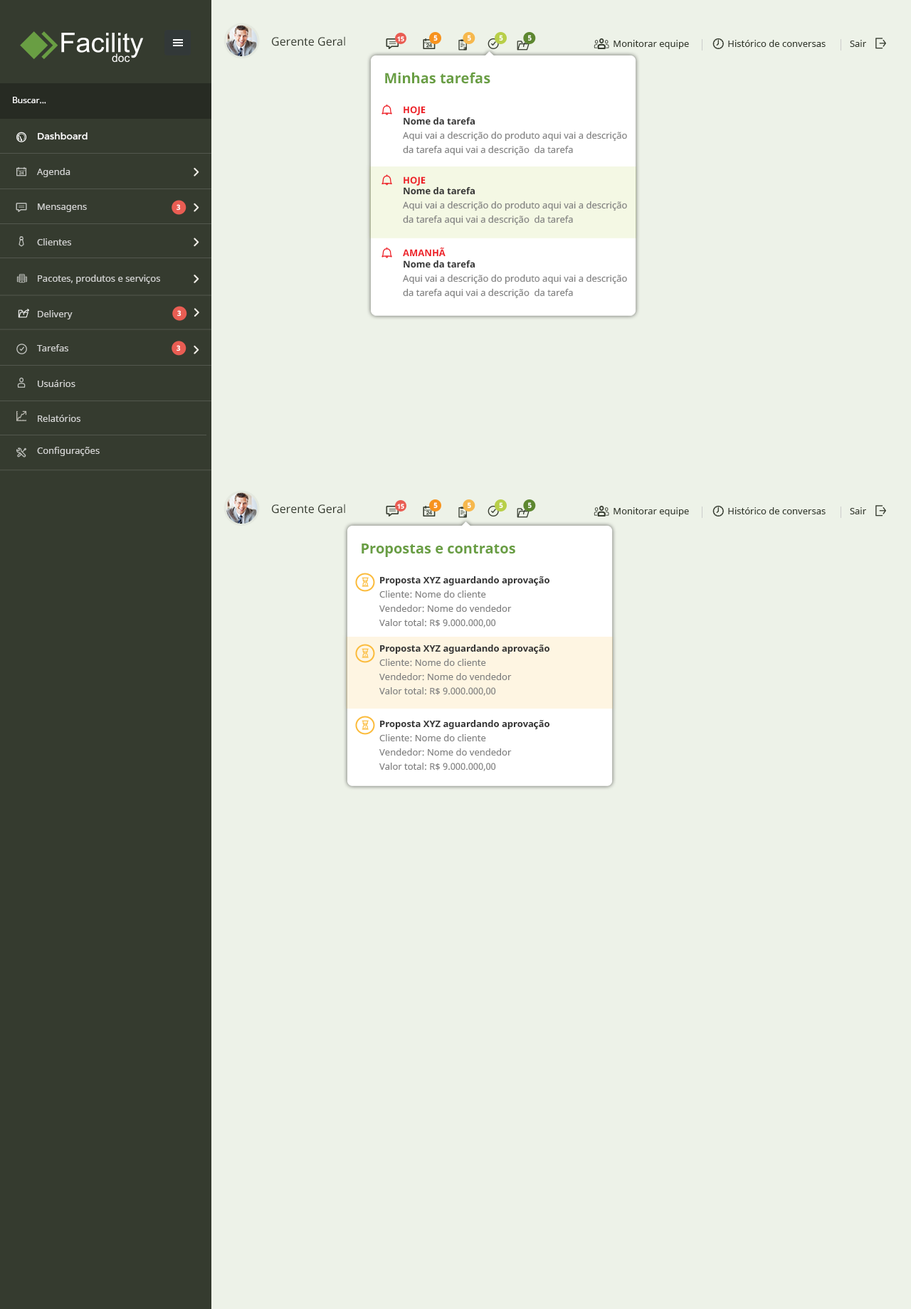
<style>
.page{position:relative;width:911px;height:1309px;background:#edf2e8}
.page>*{position:absolute;margin:0}
.t1{font:11.4px "NotoSans";color:#353b2f}
.t2{font:6.4px "NotoSans-Bold";color:#ffffff}
.t3{font:7.1px "NotoSans-Bold";color:#ffffff}
.t4{font:9.3px "NotoSans";color:#353b2f}
.t5{font:14.2px "NotoSans-Bold";color:#699e43}
.t6{font:8.5px "NotoSans";color:#ffffff}
.t7{font:9.2px/14.2px "NotoSans";color:#808080}
.t8{font:9.2px "NotoSans-Bold";color:#ed1c24}
.t9{font:9.2px "NotoSans-Bold";color:#333333}
.t10{font:9.3px "Montserrat-Regular";color:#ffffff}
.t11{font:9.3px "NotoSans";color:#d1d2d0}
.t12{font:9.3px/14.2px "NotoSans";color:#808080}
.t13{font:9.3px "NotoSans-Bold";color:#333333}
</style>
<div class="page">
<p class="t1" style="left:272px;top:36px;width:73px;height:10px">Gerente Geral</p>
<p class="t2" style="left:397px;top:36px;width:7px;height:6px">15</p>
<p class="t3" style="left:433px;top:35px;width:5px;height:6px">5</p>
<p class="t3" style="left:467px;top:35px;width:4px;height:6px">5</p>
<p class="t3" style="left:499px;top:35px;width:4px;height:6px">5</p>
<p class="t3" style="left:528px;top:35px;width:4px;height:6px">5</p>
<p class="t4" style="left:613px;top:40px;width:253px;height:9px">Monitorar equipe                Histórico de conversas          Sair</p>
<p class="t5" style="left:385px;top:72px;width:105px;height:12px">Minhas tarefas</p>
<p class="t6" style="left:13px;top:97px;width:33px;height:7px">Buscar...</p>
<p class="t7" style="left:403px;top:106px;width:224px;height:50px"><span class="t8">HOJE<br></span><span class="t9">Nome da tarefa<br></span>Aqui vai a descrição do produto aqui vai a descrição da tarefa aqui vai a descrição  da tarefa</p>
<p class="t10" style="left:38px;top:132px;width:50px;height:8px">Dashboard</p>
<p class="t11" style="left:37px;top:168px;width:33px;height:9px">Agenda</p>
<p class="t7" style="left:403px;top:176px;width:224px;height:50px"><span class="t8">HOJE<br></span><span class="t9">Nome da tarefa<br></span>Aqui vai a descrição do produto aqui vai a descrição da tarefa aqui vai a descrição  da tarefa</p>
<p class="t11" style="left:38px;top:204px;width:49px;height:8px">Mensagens</p>
<p class="t3" style="left:176px;top:204px;width:5px;height:7px">3</p>
<p class="t11" style="left:37px;top:238px;width:34px;height:7px">Clientes</p>
<p class="t7" style="left:403px;top:247px;width:224px;height:52px"><span class="t8">AMANHÃ<br></span><span class="t9">Nome da tarefa<br></span>Aqui vai a descrição do produto aqui vai a descrição da tarefa aqui vai a descrição  da tarefa</p>
<p class="t11" style="left:38px;top:275px;width:122px;height:9px">Pacotes, produtos e serviços</p>
<p class="t11" style="left:38px;top:310px;width:35px;height:9px">Delivery</p>
<p class="t3" style="left:177px;top:310px;width:4px;height:7px">3</p>
<p class="t11" style="left:37px;top:344px;width:31px;height:8px">Tarefas</p>
<p class="t3" style="left:176px;top:345px;width:5px;height:7px">3</p>
<p class="t11" style="left:38px;top:380px;width:37px;height:7px">Usuários</p>
<p class="t11" style="left:38px;top:415px;width:42px;height:7px">Relatórios</p>
<p class="t11" style="left:37px;top:447px;width:63px;height:9px">Configurações</p>
<p class="t1" style="left:272px;top:504px;width:73px;height:10px">Gerente Geral</p>
<p class="t2" style="left:397px;top:504px;width:7px;height:5px">15</p>
<p class="t3" style="left:433px;top:502px;width:5px;height:7px">5</p>
<p class="t3" style="left:467px;top:502px;width:4px;height:7px">5</p>
<p class="t3" style="left:499px;top:502px;width:4px;height:7px">5</p>
<p class="t3" style="left:528px;top:502px;width:4px;height:7px">5</p>
<p class="t4" style="left:613px;top:507px;width:253px;height:10px">Monitorar equipe                Histórico de conversas          Sair</p>
<p class="t5" style="left:361px;top:544px;width:154px;height:13px">Propostas e contratos</p>
<p class="t12" style="left:379px;top:576px;width:171px;height:195px"><span class="t13">Proposta XYZ aguardando aprovação<br></span>Cliente: Nome do cliente<br>Vendedor: Nome do vendedor<br>Valor total: R$ 9.000.000,00<br><br><span class="t13">Proposta XYZ aguardando aprovação<br></span>Cliente: Nome do cliente<br>Vendedor: Nome do vendedor<br>Valor total: R$ 9.000.000,00<br><br><span class="t13">Proposta XYZ aguardando aprovação<br></span>Cliente: Nome do cliente<br>Vendedor: Nome do vendedor<br>Valor total: R$ 9.000.000,00</p>
</div>
